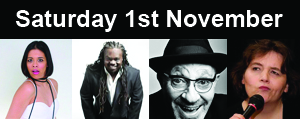
<style>
.page{position:relative;width:300px;height:119px;background:#060808}
.page>*{position:absolute;margin:0}
.t1{font:24px "Arial-BoldMT";color:#ffffff}
</style>
<div class="page">
<p class="t1" style="left:15px;top:10px;width:268px;height:22px">Saturday 1st November</p>
</div>
